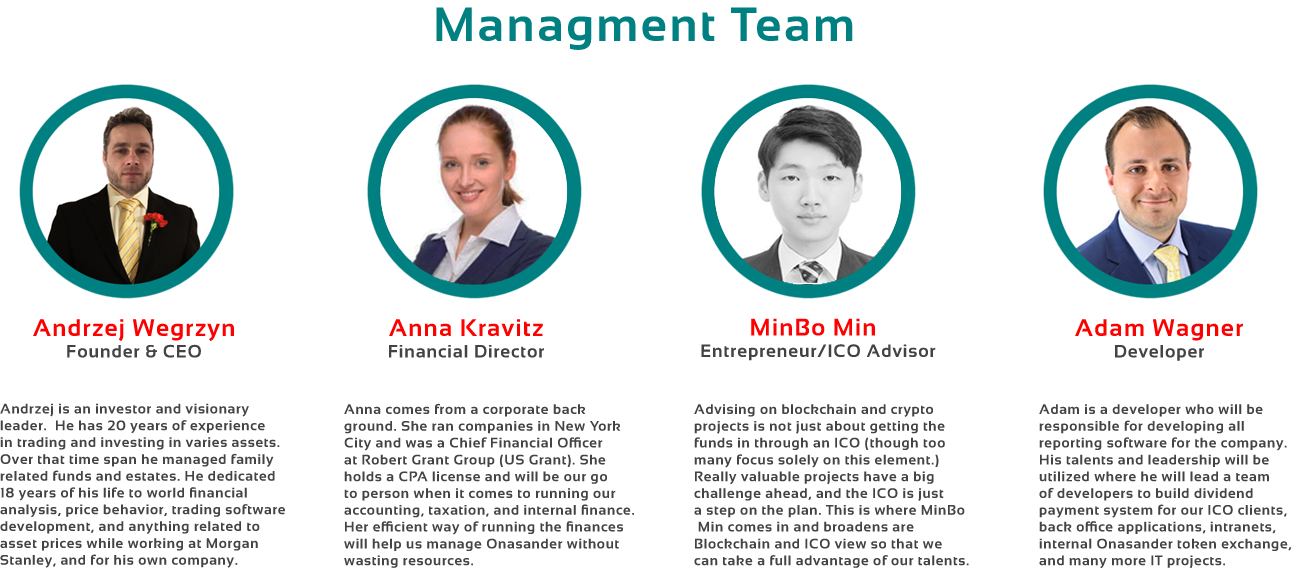
<style>
.page{position:relative;width:1292px;height:568px;background:#ffffff}
.page>*{position:absolute;margin:0}
.t1{font:48px "Sansation-Bold";letter-spacing:0.05em;color:#008080}
.t2{font:18px "Sansation-Bold";letter-spacing:0.05em;color:#434244}
.t3{font:24px "Sansation-Bold";letter-spacing:0.05em;color:#ff0000}
.t4{font:14px "Sansation-Bold";letter-spacing:0.05em;color:#434244}
</style>
<div class="page">
<p class="t1" style="left:436px;top:7px;width:417px;height:43px">Managment Team</p>
<p class="t2" style="left:701px;top:318px;width:235px;height:43px;text-align:center"><span class="t3">MinBo Min<br></span>  Entrepreneur/ICO Advisor</p>
<p class="t3" style="left:33px;top:319px;width:201px;height:39px;text-align:center">Andrzej Wegrzyn<br><span class="t2">Founder &amp; CEO</span></p>
<p class="t2" style="left:389px;top:319px;width:155px;height:39px;text-align:center"><span class="t3">Anna Kravitz<br></span>Financial Director</p>
<p class="t3" style="left:1075px;top:319px;width:168px;height:42px;text-align:center">Adam Wagner<br><span class="t2">Developer</span></p>
<p class="t4" style="left:0px;top:403px;width:285px;height:165px">Andrzej is an investor and visionary<br>leader.  He has 20 years of experience<br>in trading and investing in varies assets.<br>Over that time span he managed family<br>related funds and estates. He dedicated<br>18 years of his life to world financial<br>analysis, price behavior, trading software<br>development, and anything related to <br>asset prices while working at Morgan <br>Stanley, and for his own company.</p>
<p class="t4" style="left:344px;top:403px;width:290px;height:165px">Anna comes from a corporate back<br>ground. She ran companies in New York <br>City and was a Chief Financial Officer <br>at Robert Grant Group (US Grant). She <br>holds a CPA license and will be our go <br>to person when it comes to running our <br>accounting, taxation, and internal finance. <br>Her efficient way of running the finances <br>will help us manage Onasander without <br>wasting resources.</p>
<p class="t4" style="left:694px;top:404px;width:275px;height:164px">Advising on blockchain and crypto <br>projects is not just about getting the <br>funds in through an ICO (though too <br>many focus solely on this element.) <br>Really valuable projects have a big <br>challenge ahead, and the ICO is just <br>a step on the plan. This is where MinBo<br> Min comes in and broadens are <br>Blockchain and ICO view so that we <br>can take a full advantage of our talents.</p>
<p class="t4" style="left:1039px;top:404px;width:253px;height:165px">Adam is a developer who will be <br>responsible for developing all <br>reporting software for the company.  <br>His talents and leadership will be <br>utilized where he will lead a team <br>of developers to build dividend <br>payment system for our ICO clients, <br>back office applications, intranets, <br>internal Onasander token exchange, <br>and many more IT projects.</p>
</div>
